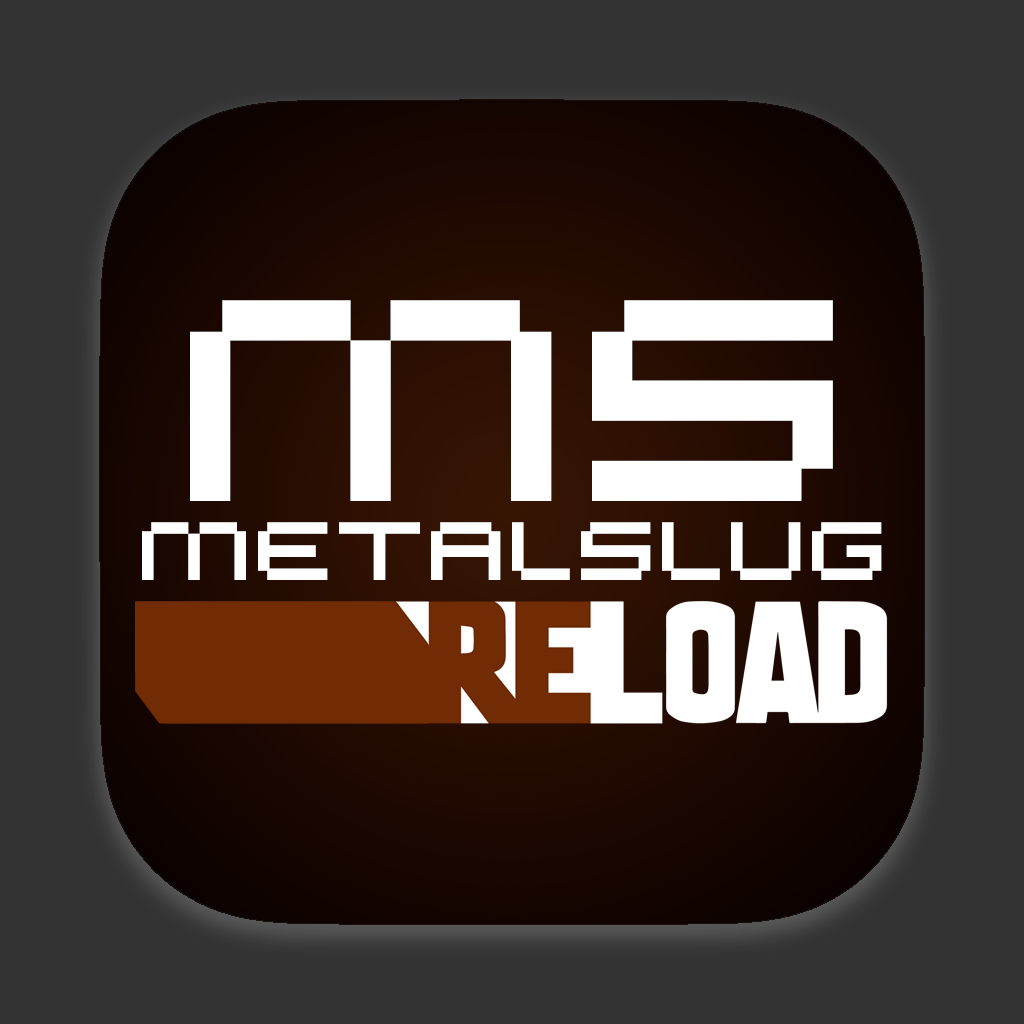
<style>
.page{position:relative;width:1024px;height:1024px;background:#333333}
.page>*{position:absolute;margin:0}
.t1{font:321.1px "untitled-regular";color:#ffffff}
.t2{font:92.5px "untitled-regular";color:#ffffff}
</style>
<div class="page">
<p class="t1" style="left:190px;top:300px;width:643px;height:201px">MS</p>
<p class="t2" style="left:142px;top:522px;width:740px;height:58px">metalSLUG</p>
</div>
